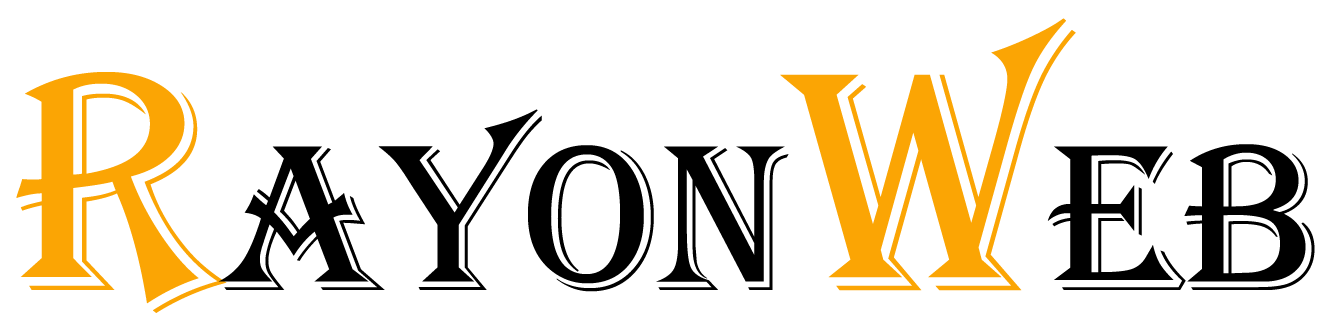
<style>
.page{position:relative;width:1324px;height:319px;background:#ffffff}
.page>*{position:absolute;margin:0}
.t1{font:215.3px "Algerian";color:#000000}
.t2{font:323px "Algerian";color:#fba504}
</style>
<div class="page">
<p class="t1" style="left:16px;top:18px;width:1299px;height:295px"><span class="t2">r</span>Ayon<span class="t2">w</span>eb</p>
</div>
